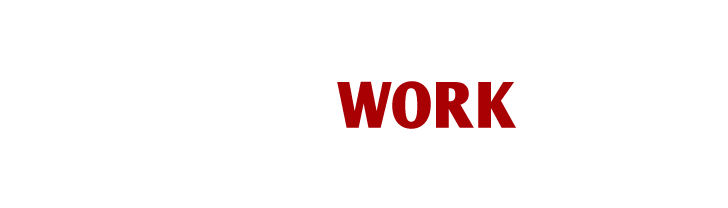
<style>
.page{position:relative;width:728px;height:208px;background:#ffffff}
.page>*{position:absolute;margin:0}
.t1{font:64.2px "ArmWrestler-Bold";color:#a90003}
.t2{font:64.2px "ArmWrestler-Bold";color:#ffffff}
</style>
<div class="page">
<p class="t1" style="left:209px;top:81px;width:307px;height:48px"><span class="t2">WEB</span>WORK</p>
</div>
